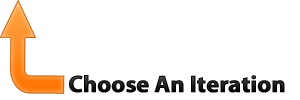
<style>
.page{position:relative;width:300px;height:100px;background:#ffffff}
.page>*{position:absolute;margin:0}
.t1{font:24px "MyriadPro-Bold";letter-spacing:-0.015em;color:#0e0f10;font-weight:bold}
</style>
<div class="page">
<p class="t1" style="left:69px;top:75px;width:216px;height:18px">Choose An Iteration</p>
</div>
